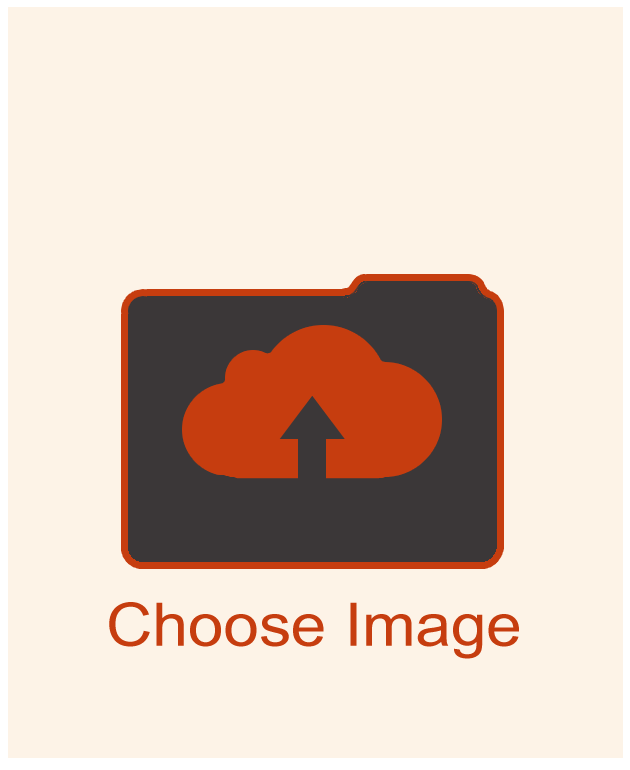
<style>
.page{position:relative;width:630px;height:770px;background:#fdf3e7}
.page>*{position:absolute;margin:0}
.t1{font:60px "ArialNarrow";color:#c63d0f;scale:1.3 1}
</style>
<div class="page">
<p class="t1" style="left:109px;top:602px;width:410px;height:57px">Choose Image</p>
</div>
